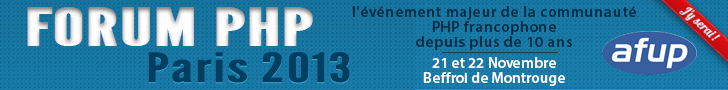
<style>
.page{position:relative;width:728px;height:90px}
.page>*{position:absolute;margin:0}
.t1{font:15px/15px "MyriadPro-Semibold";letter-spacing:0.05em;color:#002a43}
.t2{font:52px "LeagueGothic";color:#ffffff;font-weight:bold;scale:1.67 1}
.t3{font:40px "LeagueGothic";color:#003e62;font-weight:bold;scale:1.67 1}
.t4{font:15px/15px "MyriadPro-Semibold";letter-spacing:0.01em;color:#ffffff}
</style>
<div class="page">
<p class="t1" style="left:352px;top:6px;width:284px;height:44px;text-align:center">l'événement majeur de la communauté<br>PHP francophone<br>depuis plus de 10 ans</p>
<p class="t2" style="left:27px;top:7px;width:286px;height:39px">FORUM PHP</p>
<p class="t3" style="left:148px;top:53px;width:202px;height:31px">Paris 2013</p>
<p class="t3" style="left:148px;top:52px;width:202px;height:31px">Paris 2013</p>
<p class="t4" style="left:423px;top:57px;width:142px;height:29px;text-align:center">21 et 22 Novembre<br>Beffroi de Montrouge</p>
</div>
